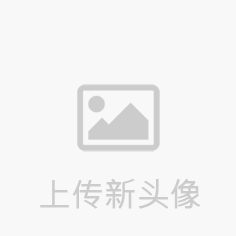
<style>
.page{position:relative;width:236px;height:236px;background:#f8f8f8}
.page>*{position:absolute;margin:0}
.t1{font:32px "MicrosoftJhengHeiRegular";color:#cccccc;font-weight:bold}
</style>
<div class="page">
<p class="t1" style="left:40px;top:179px;width:160px;height:30px">上传新头像</p>
</div>
